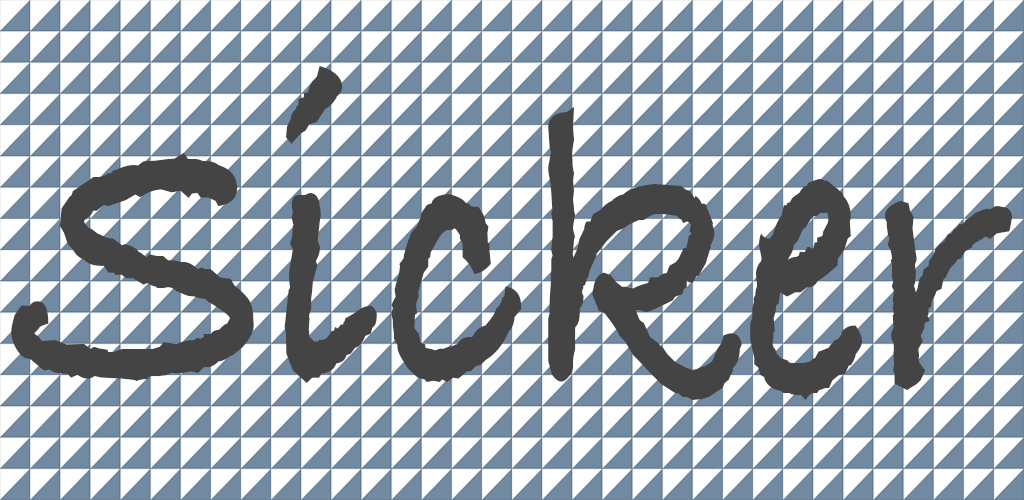
<style>
.page{position:relative;width:1024px;height:500px;background:#ffffff}
.page>*{position:absolute;margin:0}
.t1{font:427px "BradleyHandITCTT-Bold";color:#444444;scale:0.8 1}
</style>
<div class="page">
<p class="t1" style="left:11px;top:66px;width:1002px;height:334px">Sicker</p>
</div>
